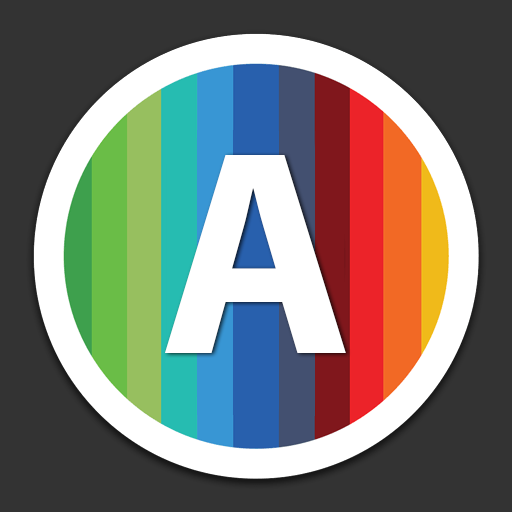
<style>
.page{position:relative;width:512px;height:512px;background:#333333}
.page>*{position:absolute;margin:0}
.t1{font:294px "MyriadPro-Bold";color:#ffffff}
</style>
<div class="page">
<p class="t1" style="left:165px;top:155px;width:181px;height:198px">A</p>
</div>
